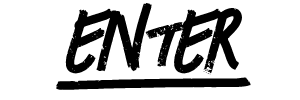
<style>
.page{position:relative;width:300px;height:100px;background:#ffffff}
.page>*{position:absolute;margin:0}
.t1{font:88px "GrungeFont-Regular";letter-spacing:-0.04em;color:#000000}
.t2{font:88.9px "GrungeFont-Regular";letter-spacing:-0.04em;color:#000000;scale:2.13 1}
</style>
<div class="page">
<p class="t1" style="left:65px;top:3px;width:177px;height:72px">enter</p>
<p class="t2" style="left:56px;top:77px;width:195px;height:13px;rotate:4deg">—</p>
</div>
